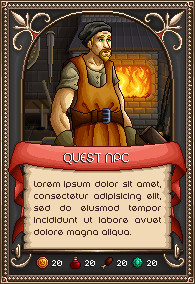
<style>
.page{position:relative;width:195px;height:284px}
.page>*{position:absolute;margin:0}
.t1{font:14px "DigitalDisco-Thin";color:#3f2222;text-transform:uppercase}
.t2{font:14px "DigitalDisco-Thin";color:#ffffff;text-transform:uppercase}
.t3{font:10px "DigitalDisco-Thin";color:#3f2222}
.t4{font:9px "DigitalDisco-Thin";color:#ffffff;text-transform:uppercase}
</style>
<div class="page">
<p class="t1" style="left:63px;top:153px;width:65px;height:11px">quest npc</p>
<p class="t2" style="left:64px;top:153px;width:65px;height:11px">quest npc</p>
<p class="t3" style="left:34px;top:181px;width:127px;height:56px;text-align:justify">Lorem ipsum dolor sit amet, consectetur adipisicing elit, sed do eiusmod tempor incididunt ut labore avuet dolore magna aliqua.</p>
<p class="t4" style="left:52px;top:260px;width:10px;height:6px">20</p>
<p class="t4" style="left:85px;top:260px;width:10px;height:6px">20</p>
<p class="t4" style="left:117px;top:260px;width:10px;height:6px">20</p>
<p class="t4" style="left:147px;top:260px;width:10px;height:6px">20</p>
</div>
